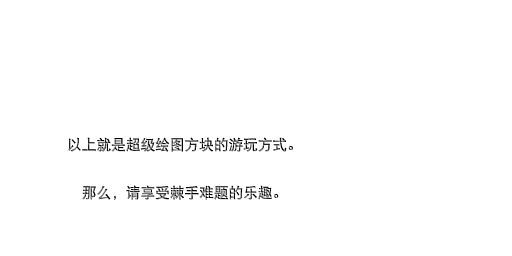
<style>
.page{position:relative;width:512px;height:256px;background:#ffffff}
.page>*{position:absolute;margin:0}
.t1{font:14.7px/24px "DFPHeiW5-GB"}
</style>
<div class="page">
<p class="t1" style="left:68px;top:137px;width:225px;height:63px;text-align:center">以上就是超级绘图方块的游玩方式。<br><br>那么，请享受棘手难题的乐趣。</p>
</div>
